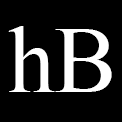
<style>
.page{position:relative;width:122px;height:122px;background:#000000}
.page>*{position:absolute;margin:0}
.t1{font:93.7px "TimesNewRomanPSMT";color:#ffffff}
</style>
<div class="page">
<p class="t1" style="left:8px;top:26px;width:104px;height:66px">hB</p>
</div>
